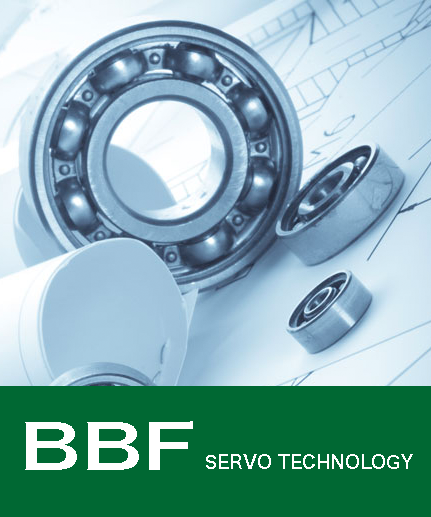
<style>
.page{position:relative;width:431px;height:517px;background:#006833}
.page>*{position:absolute;margin:0}
.t1{font:60px "HiraginoSansGB-W6";color:#ffffff;scale:1.36 1}
.t2{font:18px "HiraginoSansGB-W6";color:#ffffff}
</style>
<div class="page">
<p class="t1" style="left:25px;top:421px;width:168px;height:49px">BBF</p>
<p class="t2" style="left:206px;top:454px;width:207px;height:15px">SERVO TECHNOLOGY</p>
</div>
